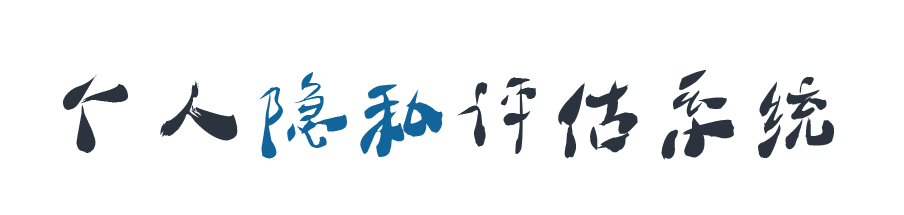
<style>
.page{position:relative;width:904px;height:215px;background:#ffffff}
.page>*{position:absolute;margin:0}
.t1{font:100px "LQSshufaziti";color:#2b333e}
.t2{font:100px "LQSshufaziti";color:#11659a}
</style>
<div class="page">
<p class="t1" style="left:63px;top:70px;width:771px;height:90px">个人<span class="t2">隐私</span>评估系统</p>
</div>
